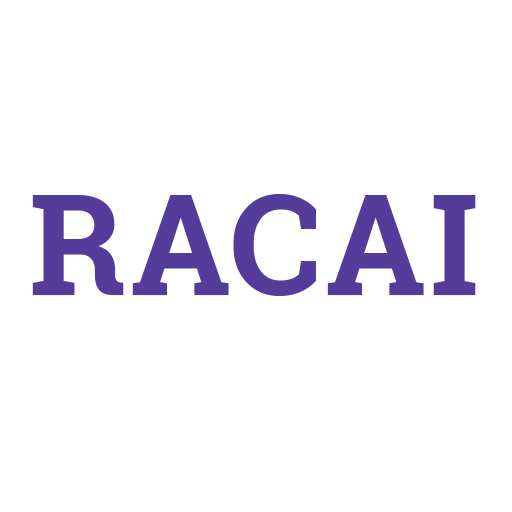
<style>
.page{position:relative;width:512px;height:512px;background:#ffffff}
.page>*{position:absolute;margin:0}
.t1{font:141.3px "RobotoSlab-Bold";letter-spacing:0.025em;color:#553c9a}
</style>
<div class="page">
<p class="t1" style="left:32px;top:194px;width:444px;height:102px">RACAI</p>
</div>
